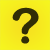
<style>
.page{position:relative;width:50px;height:50px}
.page>*{position:absolute;margin:0}
.t1{font:48px "ArialRoundedMTBold";color:#312e06;scale:1.09 1}
</style>
<div class="page">
<p class="t1" style="left:12px;top:7px;width:27px;height:37px">?</p>
</div>
